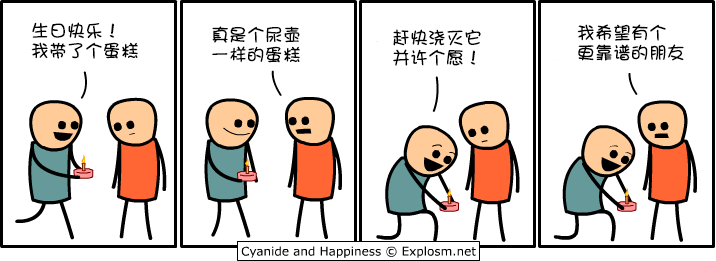
<style>
.page{position:relative;width:716px;height:261px;background:#ffffff}
.page>*{position:absolute;margin:0}
.t1{font:18px/20px "DFPShaoNvW5";color:#000000}
</style>
<div class="page">
<p class="t1" style="left:31px;top:22px;width:107px;height:37px">生日快乐！<br>我带了个蛋糕</p>
<p class="t1" style="left:212px;top:26px;width:88px;height:37px">真是个尿壶<br>一样的蛋糕</p>
<p class="t1" style="left:393px;top:29px;width:88px;height:37px">赶快浇灭它<br>并许个愿！</p>
<p class="t1" style="left:577px;top:24px;width:107px;height:37px">我希望有个<br>更靠谱的朋友</p>
</div>
